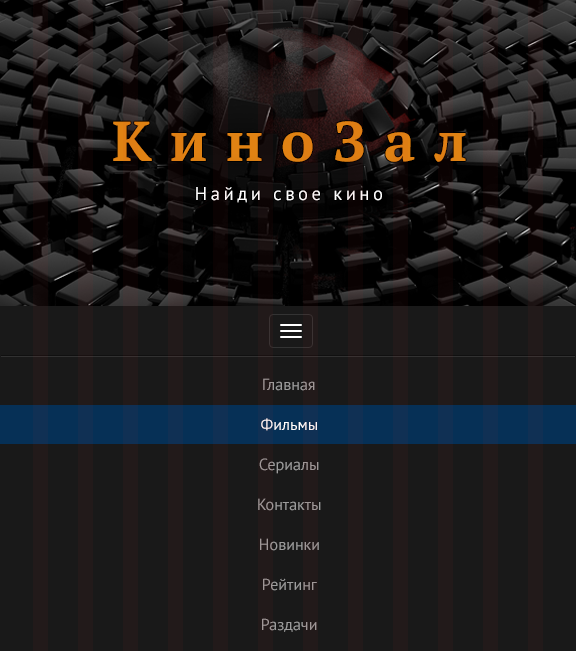
<style>
.page{position:relative;width:576px;height:651px;background:#191919}
.page>*{position:absolute;margin:0}
.t1{font:56px "PTSerif-Bold";letter-spacing:0.33em;color:#e08213}
.t2{font:18.4px "PTSans-Regular";letter-spacing:0.2em;color:#ffffff}
.t3{font:16px "PTSans-Regular";color:#9d9d9d}
.t4{font:16px "PTSans-Regular";color:#ffffff}
</style>
<div class="page">
<p class="t1" style="left:113px;top:121px;width:353px;height:41px">КиноЗал</p>
<p class="t2" style="left:196px;top:187px;width:186px;height:16px">Найди свое кино</p>
<p class="t3" style="left:263px;top:378px;width:52px;height:13px">Главная</p>
<p class="t4" style="left:261px;top:418px;width:56px;height:13px">Фильмы</p>
<p class="t3" style="left:259px;top:458px;width:60px;height:16px">Сериалы</p>
<p class="t3" style="left:258px;top:498px;width:63px;height:13px">Контакты</p>
<p class="t3" style="left:260px;top:538px;width:59px;height:13px">Новинки</p>
<p class="t3" style="left:263px;top:578px;width:54px;height:13px">Рейтинг</p>
<p class="t3" style="left:262px;top:618px;width:55px;height:14px">Раздачи</p>
</div>
